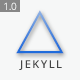
<style>
.page{position:relative;width:80px;height:80px;background:#f6f7f7}
.page>*{position:absolute;margin:0}
.t1{font:10px "OpenSans";letter-spacing:-0.03em;color:#f4f5f5}
.t2{font:61.5px "DubtronicInline";letter-spacing:-0.03em}
.t3{font:11px "OpenSans-Semibold";letter-spacing:0.13em;color:#454646}
</style>
<div class="page">
<p class="t1" style="left:4px;top:2px;width:13px;height:8px">1.0</p>
<p class="t2" style="left:16px;top:10px;width:48px;height:44px">A</p>
<p class="t3" style="left:19px;top:60px;width:43px;height:10px">JEKYLL</p>
</div>
